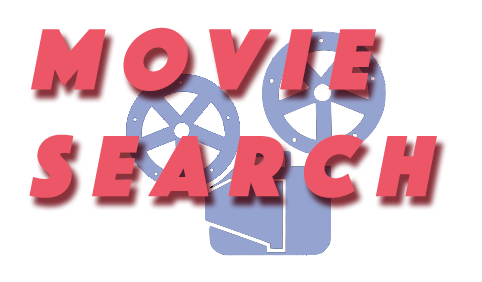
<style>
.page{position:relative;width:482px;height:282px;background:#ffffff}
.page>*{position:absolute;margin:0}
.t1{font:89px "Phosphate-Solid";letter-spacing:0.2em;color:#ed5667;font-weight:bold;font-style:italic}
</style>
<div class="page">
<p class="t1" style="left:29px;top:27px;width:408px;height:171px">MOVIE SEARCH</p>
</div>
